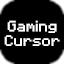
<style>
.page{position:relative;width:64px;height:64px;background:#000000}
.page>*{position:absolute;margin:0}
.t1{font:12px "Minecraft";color:#ffffff;font-weight:bold}
</style>
<div class="page">
<p class="t1" style="left:4px;top:20px;width:56px;height:26px;text-align:center">Gaming<br>Cursor</p>
</div>
